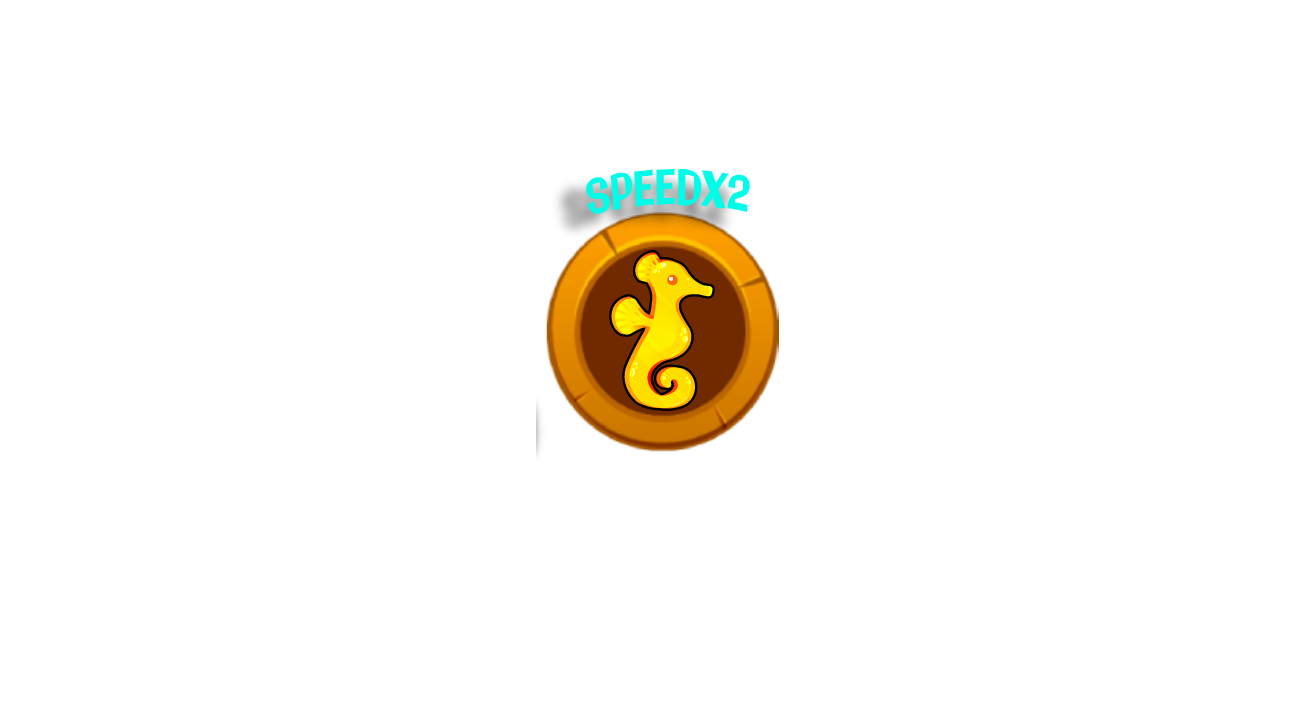
<style>
.page{position:relative;width:1315px;height:720px;background:#ffffff}
.page>*{position:absolute;margin:0}
.t1{font:47.9px "Galindo-Regular";color:#0ffde9;scale:0.71 1}
</style>
<div class="page">
<p class="t1" style="left:586px;top:168px;width:164px;height:46px">SPEEDX2</p>
</div>
